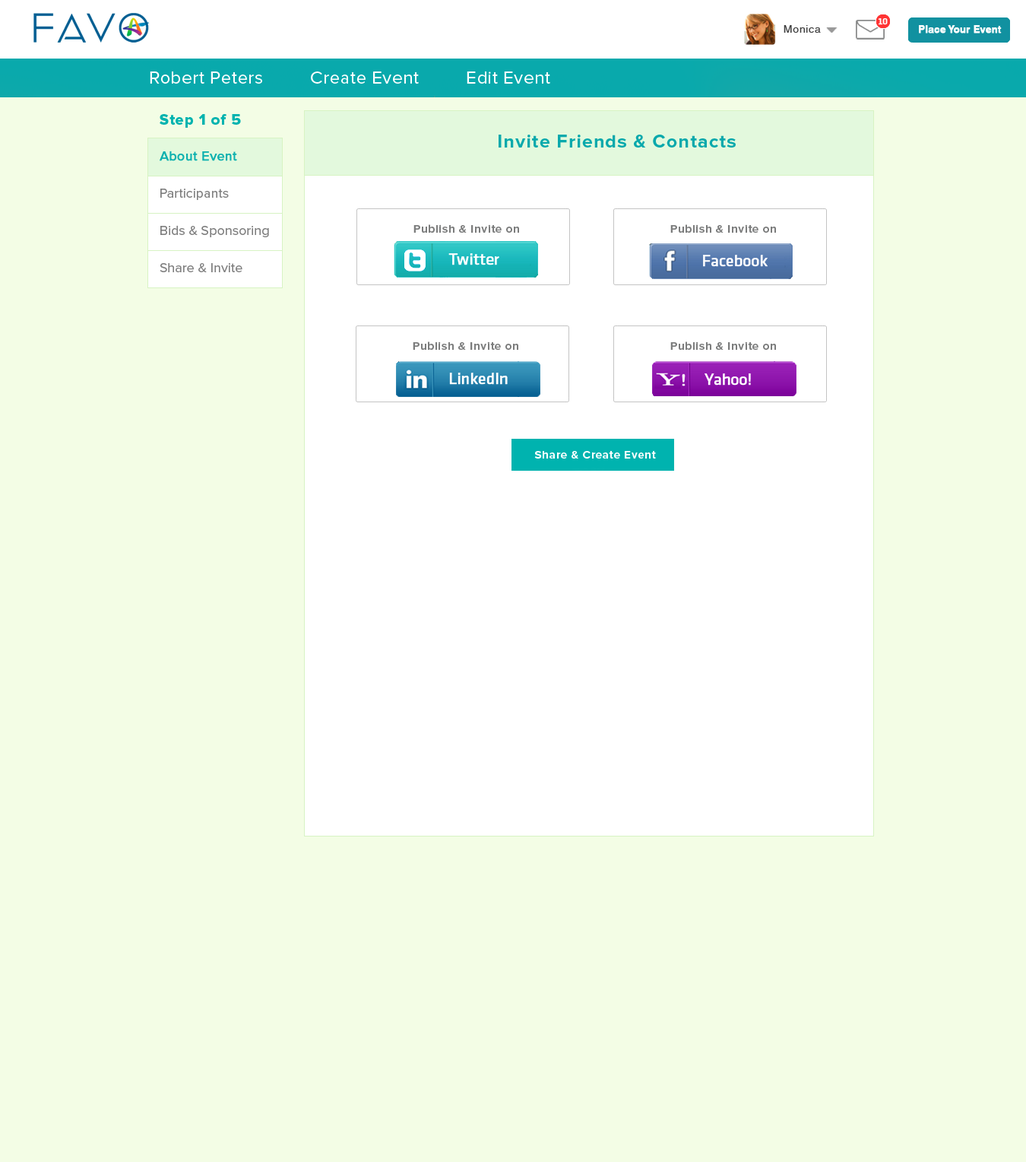
<style>
.page{position:relative;width:1026px;height:1162px;background:#f3fde5}
.page>*{position:absolute;margin:0}
.t1{font:10.6px "HelveticaWorld-Regular";letter-spacing:0.05em;color:#3f3f3f}
.t2{font:9.1px "KlavikaRegular-TF";letter-spacing:-0.025em;color:#fffefe;font-weight:bold}
.t3{font:9.5px "HelveticaWorld-Bold";letter-spacing:0.025em;color:#fffefe;font-weight:bold}
.t4{font:18.2px "ProximaNova-Regular";letter-spacing:0.025em;color:#ffffff}
.t5{font:15.2px "ProximaNova-Extrabld";letter-spacing:0.05em;color:#00b3af}
.t6{font:19px "ProximaNova-Bold";letter-spacing:0.05em;color:#08a9ac}
.t7{font:13.7px/37.3px "ProximaNova-Regular";color:#7e7e7e}
.t8{font:13.7px/37.3px "ProximaNova-Regular";color:#0db1af;font-weight:bold}
.t9{font:11.4px "ProximaNova-Bold";letter-spacing:0.05em;color:#7c7d7d}
.t10{font:11.4px "ProximaNova-Bold";letter-spacing:0.05em;color:#ffffff}
</style>
<div class="page">
<p class="t1" style="left:784px;top:25px;width:37px;height:8px">Monica</p>
<p class="t2" style="left:878px;top:18px;width:10px;height:7px">10</p>
<p class="t3" style="left:919px;top:25px;width:83px;height:8px">Place Your Event</p>
<p class="t4" style="left:150px;top:71px;width:400px;height:13px">Robert Peters         Create Event         Edit Event</p>
<p class="t5" style="left:160px;top:114px;width:81px;height:14px">Step 1 of 5</p>
<p class="t6" style="left:499px;top:135px;width:237px;height:12px">Invite Friends &amp; Contacts</p>
<p class="t7" style="left:160px;top:151px;width:109px;height:121px"><span class="t8">About Event<br></span>Participants<br>Bids &amp; Sponsoring<br>Share &amp; Invite</p>
<p class="t9" style="left:414px;top:224px;width:105px;height:9px">Publish &amp; Invite on</p>
<p class="t9" style="left:671px;top:224px;width:105px;height:9px">Publish &amp; Invite on</p>
<p class="t9" style="left:413px;top:341px;width:106px;height:9px">Publish &amp; Invite on</p>
<p class="t9" style="left:671px;top:341px;width:105px;height:9px">Publish &amp; Invite on</p>
<p class="t10" style="left:534px;top:451px;width:122px;height:7px">Share &amp; Create Event</p>
</div>
